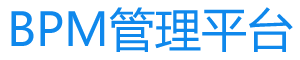
<style>
.page{position:relative;width:300px;height:60px;background:#ffffff}
.page>*{position:absolute;margin:0}
.t1{font:46px "MicrosoftYaHei";color:#0f88ec}
</style>
<div class="page">
<p class="t1" style="left:11px;top:7px;width:282px;height:45px">BPM管理平台</p>
</div>
